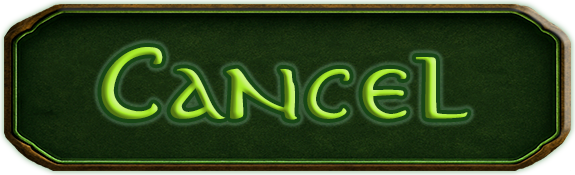
<style>
.page{position:relative;width:575px;height:175px}
.page>*{position:absolute;margin:0}
.t1{font:100px "MiddleEarth"}
</style>
<div class="page">
<p class="t1" style="left:101px;top:47px;width:367px;height:73px">Cancel</p>
</div>
